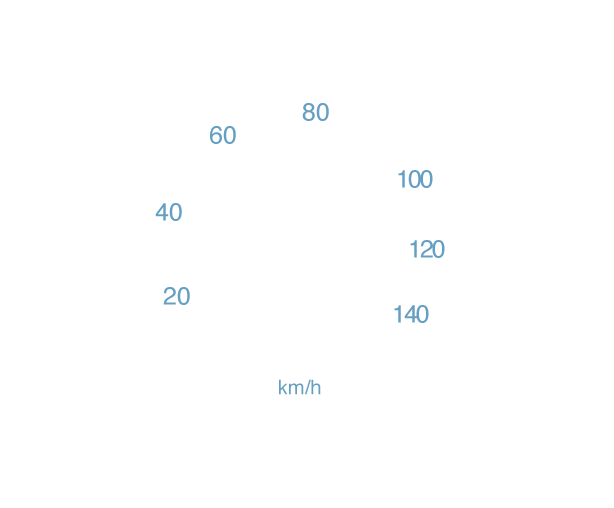
<style>
.page{position:relative;width:614px;height:508px;background:#ffffff}
.page>*{position:absolute;margin:0}
.t1{font:25px "Helvetica";color:#65a0c2}
.t2{font:25px "Helvetica";letter-spacing:-0.08em;color:#65a0c2}
.t3{font:20.1px "Helvetica";color:#65a0c2}
</style>
<div class="page">
<p class="t1" style="left:302px;top:103px;width:27px;height:18px">80</p>
<p class="t1" style="left:210px;top:126px;width:26px;height:18px">60</p>
<p class="t2" style="left:398px;top:170px;width:35px;height:18px">100</p>
<p class="t1" style="left:155px;top:203px;width:27px;height:18px">40</p>
<p class="t2" style="left:410px;top:240px;width:35px;height:18px">120</p>
<p class="t1" style="left:163px;top:287px;width:27px;height:18px">20</p>
<p class="t2" style="left:394px;top:305px;width:35px;height:18px">140</p>
<p class="t3" style="left:279px;top:379px;width:42px;height:16px">km/h</p>
</div>
